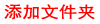
<style>
.page{position:relative;width:100px;height:24px;background:#ffffff}
.page>*{position:absolute;margin:0}
.t1{font:16px "SimHei";color:#ff0303;scale:1.14 1}
</style>
<div class="page">
<p class="t1" style="left:4px;top:4px;width:91px;height:16px">添加文件夹</p>
</div>
